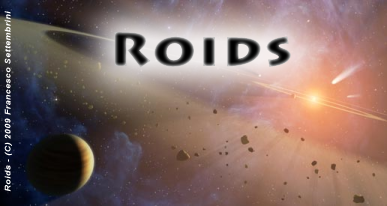
<style>
.page{position:relative;width:387px;height:206px}
.page>*{position:absolute;margin:0}
.t1{font:8px "Arial-BoldItalicMT";letter-spacing:0.05em;color:#ffffff;scale:1.1 1}
.t2{font:48px "LithosPro-Black";letter-spacing:0.05em;scale:1.1 1}
</style>
<div class="page">
<p class="t1" style="left:4px;top:11px;width:8px;height:181px;rotate:-90deg">Roids - (C) 2009 Francesco Settembrini</p>
<p class="t2" style="left:114px;top:32px;width:177px;height:36px">Roids</p>
</div>
